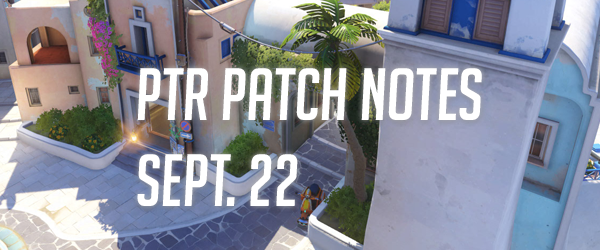
<style>
.page{position:relative;width:600px;height:250px}
.page>*{position:absolute;margin:0}
.t1{font:72px "BigNoodleTitling-Oblique";color:#ffffff}
</style>
<div class="page">
<p class="t1" style="left:137px;top:68px;width:345px;height:138px">PTR PATCH NOTES<br>SEPT. 22</p>
</div>
